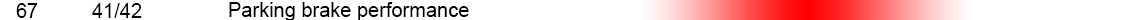
<style>
.page{position:relative;width:1125px;height:20px;background:#ffffff}
.page>*{position:absolute;margin:0}
.t1{font:20px "ArialMT";color:#000000}
</style>
<div class="page">
<p class="t1" style="left:16px;top:3px;width:22px;height:15px">67</p>
<p class="t1" style="left:92px;top:3px;width:50px;height:15px">41/42</p>
<p class="t1" style="left:229px;top:2px;width:240px;height:19px">Parking brake performance</p>
</div>
